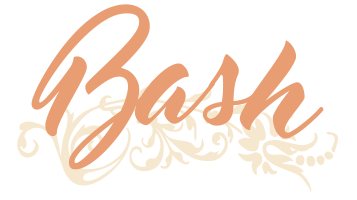
<style>
.page{position:relative;width:357px;height:200px;background:#ffffff}
.page>*{position:absolute;margin:0}
.t1{font:120.7px "MasterOfBreak";color:#e89e72}
</style>
<div class="page">
<p class="t1" style="left:31px;top:4px;width:293px;height:166px">Bash</p>
</div>
